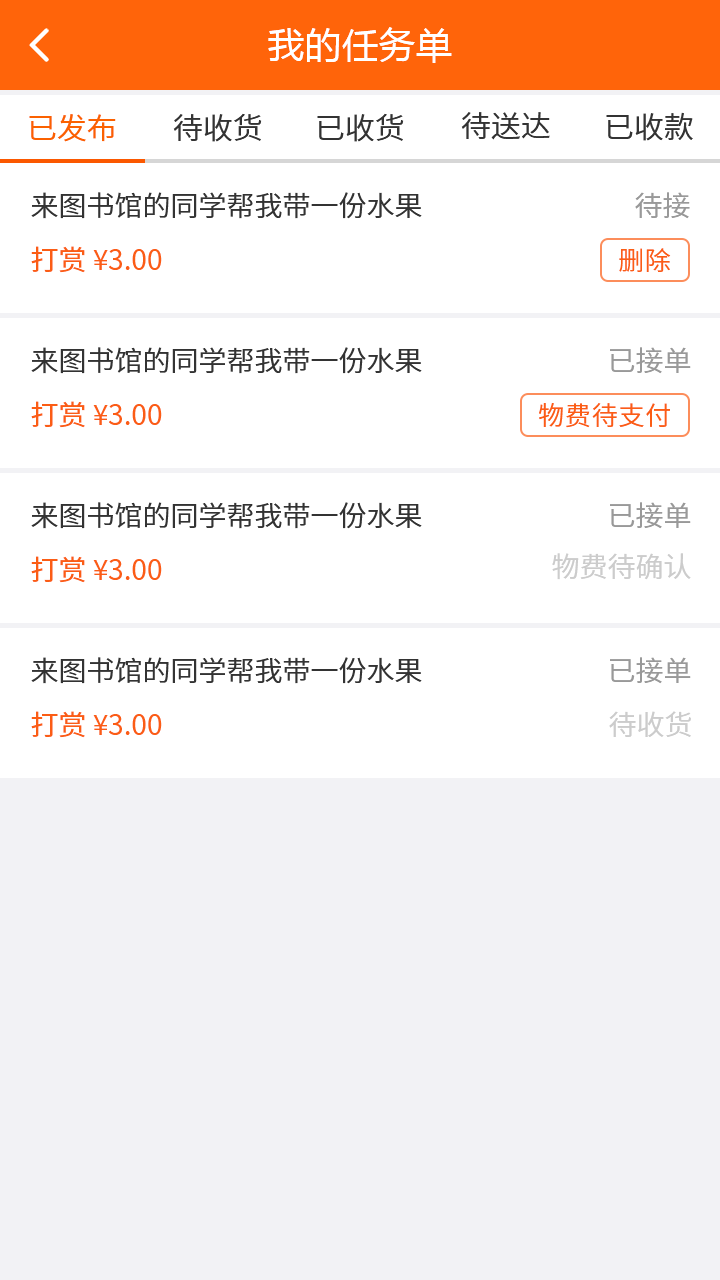
<style>
.page{position:relative;width:720px;height:1280px;background:#ffffff}
.page>*{position:absolute;margin:0}
.t1{font:36px "MicrosoftYaHei";letter-spacing:0.03em;color:#ffffff}
.t2{font:30px "NotoSansCJKsc-DemiLight";color:#333333;font-variant:small-caps}
.t3{font:30px "NotoSansCJKsc-DemiLight";color:#fb6100;font-variant:small-caps}
.t4{font:28px "NotoSansCJKsc-DemiLight";color:#333333;font-variant:small-caps}
.t5{font:28px "NotoSansCJKsc-DemiLight";color:#999999;font-variant:small-caps}
.t6{font:28px "NotoSansCJKsc-Regular";color:#fb5d15;font-variant:small-caps}
.t7{font:26px "NotoSansCJKsc-DemiLight";letter-spacing:0.03em;color:#fb5d15;font-variant:small-caps}
.t8{font:28px "NotoSansCJKsc-DemiLight";color:#cccccc;font-variant:small-caps}
</style>
<div class="page">
<p class="t1" style="left:268px;top:27px;width:184px;height:36px">我的任务单</p>
<p class="t2" style="left:173px;top:113px;width:89px;height:29px">待收货</p>
<p class="t2" style="left:317px;top:113px;width:87px;height:29px">已收货</p>
<p class="t2" style="left:461px;top:112px;width:89px;height:28px">待送达</p>
<p class="t2" style="left:606px;top:112px;width:87px;height:29px">已收款</p>
<p class="t3" style="left:29px;top:114px;width:87px;height:28px">已发布</p>
<p class="t4" style="left:31px;top:192px;width:391px;height:27px">来图书馆的同学帮我带一份水果</p>
<p class="t5" style="left:635px;top:192px;width:55px;height:27px">待接</p>
<p class="t6" style="left:31px;top:246px;width:131px;height:27px">打赏 ¥3.00</p>
<p class="t7" style="left:619px;top:248px;width:52px;height:24px">删除</p>
<p class="t4" style="left:31px;top:347px;width:391px;height:27px">来图书馆的同学帮我带一份水果</p>
<p class="t5" style="left:610px;top:347px;width:81px;height:27px">已接单</p>
<p class="t6" style="left:31px;top:401px;width:131px;height:27px">打赏 ¥3.00</p>
<p class="t7" style="left:539px;top:403px;width:131px;height:25px">物费待支付</p>
<p class="t4" style="left:31px;top:502px;width:391px;height:27px">来图书馆的同学帮我带一份水果</p>
<p class="t5" style="left:610px;top:502px;width:81px;height:27px">已接单</p>
<p class="t6" style="left:31px;top:556px;width:131px;height:27px">打赏 ¥3.00</p>
<p class="t8" style="left:552px;top:553px;width:139px;height:27px">物费待确认</p>
<p class="t4" style="left:31px;top:657px;width:391px;height:27px">来图书馆的同学帮我带一份水果</p>
<p class="t5" style="left:610px;top:657px;width:81px;height:27px">已接单</p>
<p class="t6" style="left:31px;top:711px;width:131px;height:27px">打赏 ¥3.00</p>
<p class="t8" style="left:609px;top:711px;width:82px;height:26px">待收货</p>
</div>
